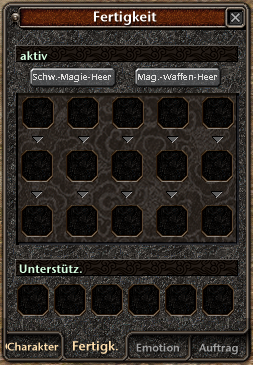
<style>
.page{position:relative;width:253px;height:365px}
.page>*{position:absolute;margin:0}
.t1{font:14px "StoneSansSemITCTTSemi";color:#ffffff}
.t2{font:12px "StoneSansSemITCTTSemi";color:#d8ffe1}
.t3{font:9px "StoneSansSemITCTTSemi";color:#e0dfdd}
</style>
<div class="page">
<p class="t1" style="left:94px;top:11px;width:63px;height:14px">Fertigkeit</p>
<p class="t2" style="left:20px;top:51px;width:28px;height:9px">aktiv</p>
<p class="t3" style="left:33px;top:73px;width:78px;height:9px">Schw.-Magie-Heer</p>
<p class="t3" style="left:138px;top:73px;width:79px;height:9px">Mag.-Waffen-Heer</p>
<p class="t2" style="left:19px;top:264px;width:63px;height:9px">Unterstütz.</p>
</div>
